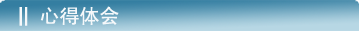
<style>
.page{position:relative;width:359px;height:31px}
.page>*{position:absolute;margin:0}
.t1{font:20px "SimHei";color:#f5f8fa}
.t2{font:20px "Impact";color:#f5f8fa}
</style>
<div class="page">
<p class="t1" style="left:19px;top:6px;width:100px;height:20px"><span class="t2">||   </span>心得体会</p>
</div>
